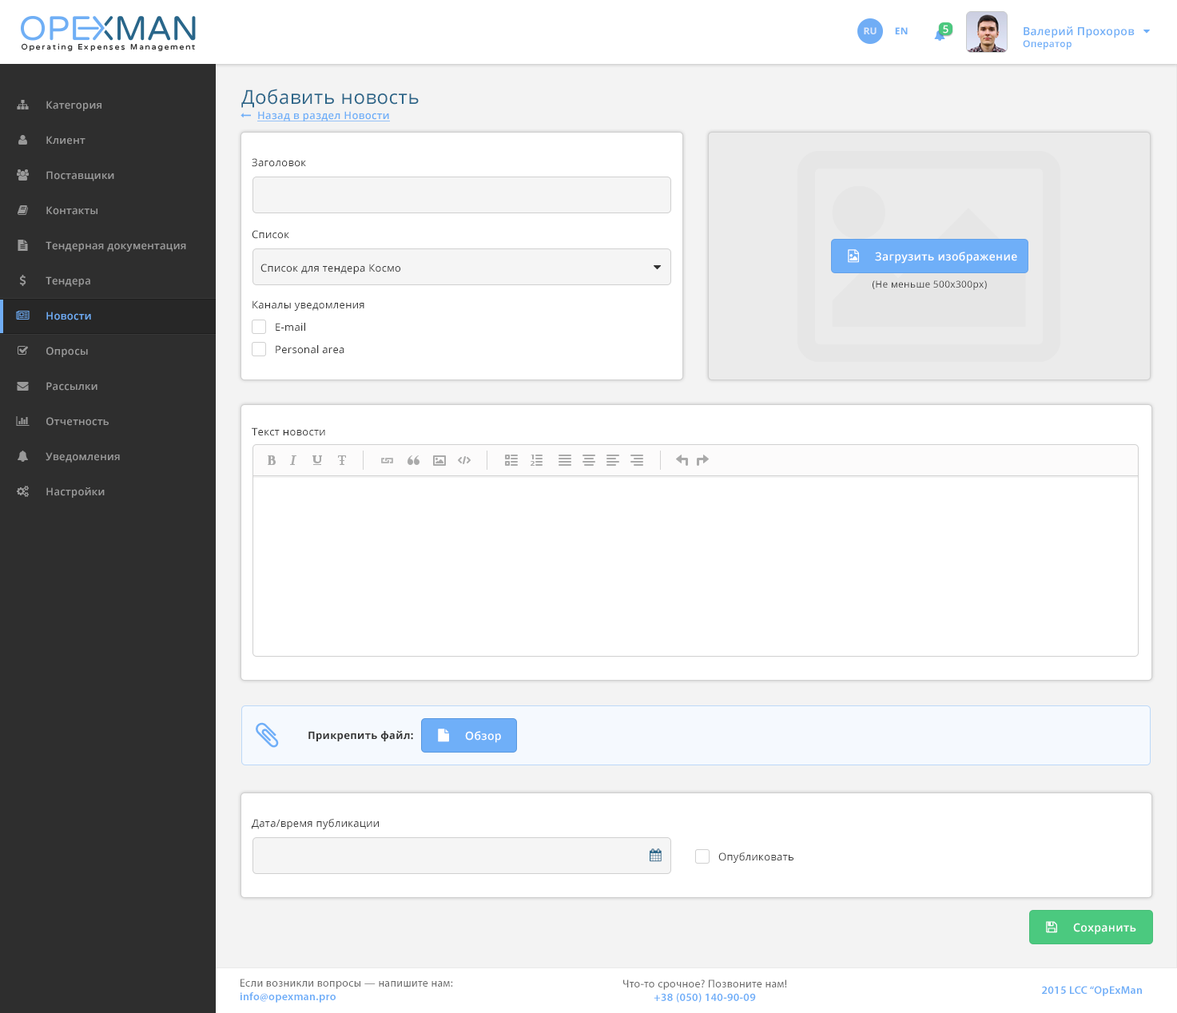
<style>
.page{position:relative;width:1177px;height:1013px;background:#ffffff}
.page>*{position:absolute;margin:0}
.t1{font:9.6px "OpenSans-Bold";letter-spacing:0.025em;color:#dbe8fc;text-transform:uppercase}
.t2{font:9.6px "OpenSans-Bold";letter-spacing:0.025em;color:#6faff8;text-transform:uppercase}
.t3{font:10.4px "OpenSans-Semibold";letter-spacing:0.025em;color:#ffffff}
.t4{font:11.1px "OpenSans-Semibold";letter-spacing:0.025em;color:#6eaef7}
.t5{font:9.6px "OpenSans-Semibold";letter-spacing:0.025em;color:#6eaef7}
.t6{font:19.2px "OpenSans";letter-spacing:0.025em;color:#2c6689}
.t7{font:10.4px "OpenSans-Semibold";letter-spacing:0.025em;color:#999999}
.t8{font:10.4px "OpenSans-Semibold";letter-spacing:0.025em;color:#6faff8;text-decoration:underline}
.t9{font:10.4px "OpenSans";letter-spacing:0.025em;color:#333333}
.t10{font:11.1px "OpenSans-Semibold";letter-spacing:0.025em;color:#ffffff}
.t11{font:9.6px "OpenSans";letter-spacing:0.025em;color:#333333}
.t12{font:10.4px "OpenSans-Semibold";letter-spacing:0.025em;color:#70adf5}
.t13{font:10.4px "OpenSans-Bold";letter-spacing:0.025em;color:#333333}
.t14{font:11.2px "OpenSans-Semibold";letter-spacing:0.025em;color:#ffffff}
.t15{font:10.4px "OpenSans";letter-spacing:0.025em;color:#3a3a3a}
.t16{font:11.1px "MyriadPro-Regular";letter-spacing:0.025em;color:#696969}
.t17{font:11.1px "MyriadPro-Semibold";letter-spacing:0.025em;color:#6eaef8}
</style>
<div class="page">
<p class="t1" style="left:864px;top:27px;width:13px;height:7px">Ru</p>
<p class="t2" style="left:895px;top:27px;width:13px;height:7px">EN</p>
<p class="t3" style="left:943px;top:25px;width:5px;height:9px">5</p>
<p class="t4" style="left:1023px;top:26px;width:112px;height:24px">Валерий Прохоров<br><span class="t5">Оператор</span></p>
<p class="t6" style="left:241px;top:89px;width:178px;height:19px">Добавить новость</p>
<p class="t7" style="left:46px;top:101px;width:55px;height:10px">Категория</p>
<p class="t8" style="left:257px;top:111px;width:133px;height:10px">Назад в раздел Новости</p>
<p class="t7" style="left:46px;top:136px;width:39px;height:9px">Клиент</p>
<p class="t9" style="left:252px;top:158px;width:54px;height:9px">Заголовок</p>
<p class="t7" style="left:46px;top:171px;width:68px;height:10px">Поставщики</p>
<p class="t7" style="left:46px;top:206px;width:51px;height:9px">Контакты</p>
<p class="t9" style="left:252px;top:230px;width:37px;height:9px">Список</p>
<p class="t7" style="left:46px;top:241px;width:140px;height:11px">Тендерная документация</p>
<p class="t10" style="left:875px;top:252px;width:142px;height:12px">Загрузить изображение</p>
<p class="t9" style="left:260px;top:264px;width:140px;height:10px">Список для тендера Космо</p>
<p class="t7" style="left:46px;top:276px;width:44px;height:11px">Тендера</p>
<p class="t11" style="left:873px;top:280px;width:114px;height:10px">(Не меньше 500х300рх)</p>
<p class="t9" style="left:252px;top:300px;width:112px;height:11px">Каналы уведомления</p>
<p class="t12" style="left:46px;top:312px;width:45px;height:8px">Новости</p>
<p class="t9" style="left:276px;top:323px;width:29px;height:9px">E-mail</p>
<p class="t7" style="left:46px;top:347px;width:42px;height:10px">Опросы</p>
<p class="t9" style="left:276px;top:345px;width:68px;height:9px">Personal area</p>
<p class="t7" style="left:46px;top:382px;width:51px;height:9px">Рассылки</p>
<p class="t7" style="left:46px;top:417px;width:63px;height:9px">Отчетность</p>
<p class="t9" style="left:252px;top:427px;width:73px;height:9px">Текст новости</p>
<p class="t7" style="left:46px;top:452px;width:74px;height:11px">Уведомления</p>
<p class="t7" style="left:46px;top:487px;width:59px;height:11px">Настройки</p>
<p class="t13" style="left:308px;top:730px;width:105px;height:11px">Прикрепить файл:</p>
<p class="t14" style="left:465px;top:731px;width:36px;height:12px">Обзор</p>
<p class="t9" style="left:252px;top:819px;width:127px;height:10px">Дата/время публикации</p>
<p class="t15" style="left:718px;top:853px;width:75px;height:10px">Опубликовать</p>
<p class="t14" style="left:1073px;top:923px;width:63px;height:12px">Сохранить</p>
<p class="t16" style="left:240px;top:979px;width:213px;height:24px">Если возникли вопросы — напишите нам:<br><span class="t17">info@opexman.pro</span></p>
<p class="t16" style="left:623px;top:980px;width:164px;height:23px;text-align:center">Что-то срочное? Позвоните нам!<br><span class="t17">+38 (050) 140-90-09</span></p>
<p class="t17" style="left:1042px;top:986px;width:100px;height:10px">2015 LCC “OpExMan</p>
</div>
